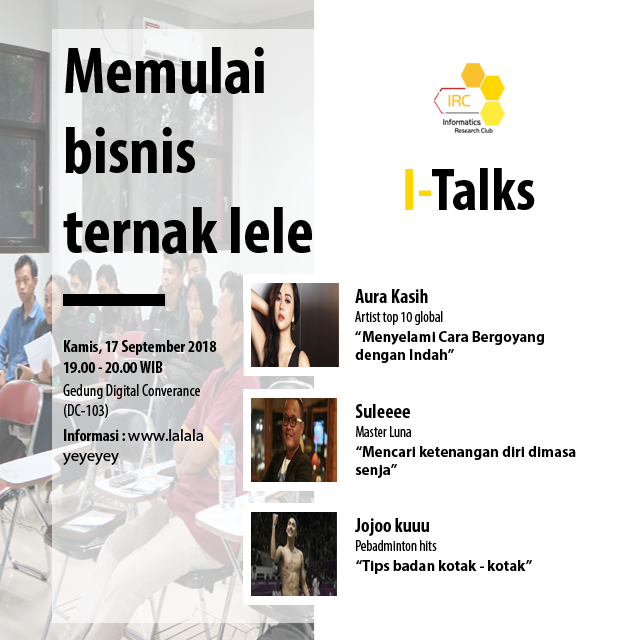
<style>
.page{position:relative;width:640px;height:640px;background:#ffffff}
.page>*{position:absolute;margin:0}
.t1{font:66.7px "MyriadPro-BoldCond";color:#000000}
.t2{font:60px "MyriadPro-BoldCond";color:#000000}
.t3{font:60px "MyriadPro-BoldCond";color:#fed700}
.t4{font:20px "MyriadPro-BoldCond";color:#000000}
.t5{font:15px "MyriadPro-Cond";color:#000000}
.t6{font:16.7px "MyriadPro-BoldCond";color:#000000}
.t7{font:15px "MyriadPro-Bold";color:#000000}
.t8{font:16.7px "MyriadPro-Cond";color:#000000}
.t9{font:16.7px "MyriadPro-Regular";color:#000000}
</style>
<div class="page">
<p class="t1" style="left:63px;top:47px;width:249px;height:207px">Memulai bisnis ternak lele</p>
<p class="t2" style="left:405px;top:168px;width:130px;height:42px"><span class="t3">I-</span>Talks</p>
<p class="t4" style="left:355px;top:289px;width:73px;height:14px">Aura Kasih</p>
<p class="t5" style="left:355px;top:311px;width:88px;height:14px">Artist top 10 global</p>
<p class="t6" style="left:64px;top:340px;width:153px;height:15px">Kamis, 17 September 2018</p>
<p class="t7" style="left:355px;top:331px;width:189px;height:32px">“Menyelami Cara Bergoyang dengan Indah”</p>
<p class="t6" style="left:63px;top:361px;width:100px;height:12px">19.00 - 20.00 WIB</p>
<p class="t8" style="left:63px;top:384px;width:137px;height:34px">Gedung Digital Converance (DC-103)</p>
<p class="t4" style="left:355px;top:404px;width:55px;height:14px">Suleeee</p>
<p class="t9" style="left:63px;top:429px;width:141px;height:36px"><span class="t6">Informasi : </span>www.lalala yeyeyey</p>
<p class="t5" style="left:356px;top:426px;width:55px;height:11px">Master Luna</p>
<p class="t7" style="left:355px;top:446px;width:221px;height:32px">“Mencari ketenangan diri dimasa senja”</p>
<p class="t4" style="left:355px;top:518px;width:74px;height:18px">Jojoo kuuu</p>
<p class="t5" style="left:356px;top:540px;width:81px;height:11px">Pebadminton hits</p>
<p class="t7" style="left:356px;top:560px;width:176px;height:14px">“Tips badan kotak - kotak”</p>
</div>
